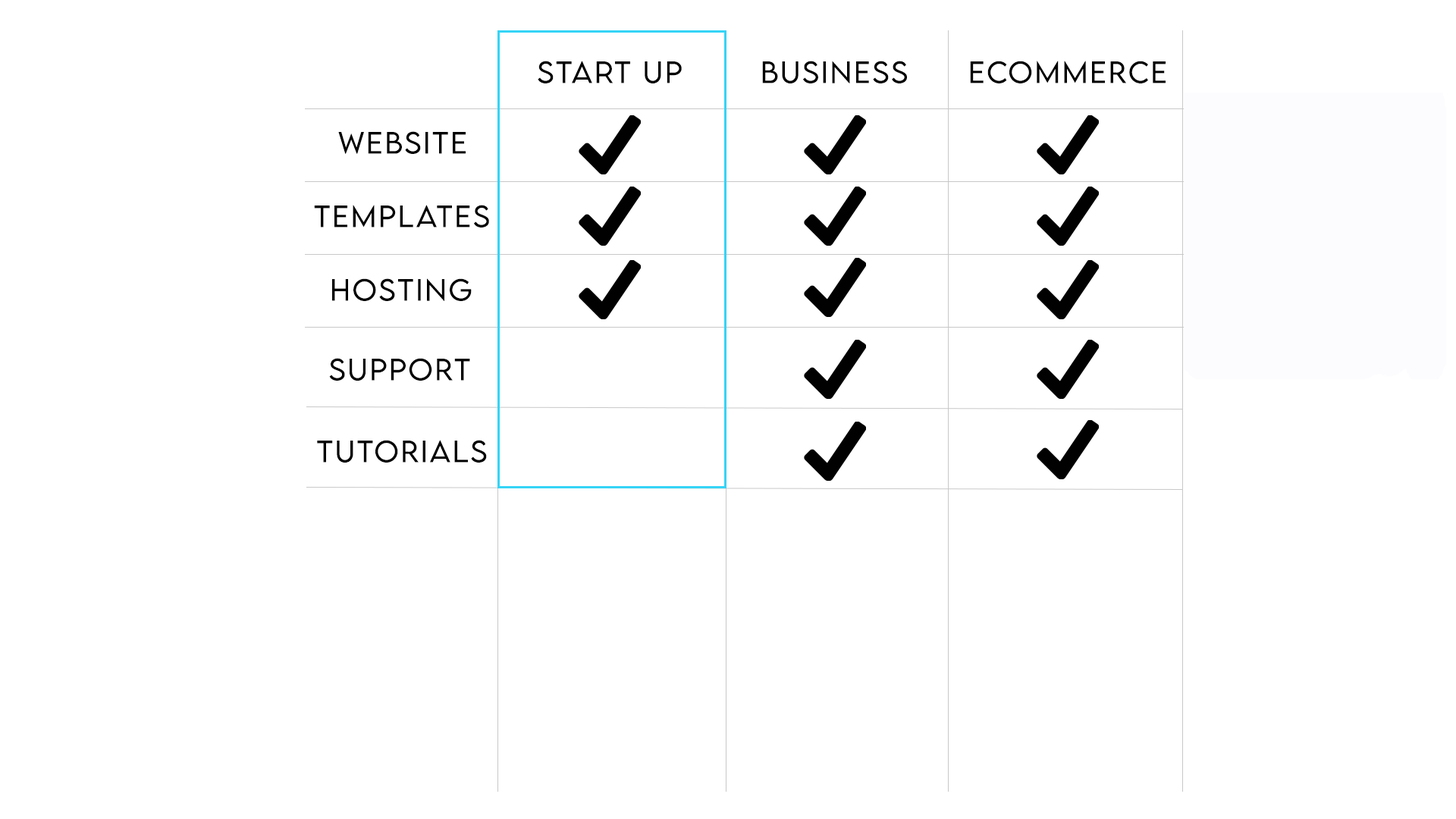
<style>
.page{position:relative;width:1456px;height:819px;background:#ffffff}
.page>*{position:absolute;margin:0}
.t1{font:27.3px "LEMONMILK-Light";letter-spacing:0.075em;color:#000000}
</style>
<div class="page">
<p class="t1" style="left:538px;top:61px;width:144px;height:22px">Start up</p>
<p class="t1" style="left:762px;top:61px;width:145px;height:22px">Business</p>
<p class="t1" style="left:970px;top:61px;width:196px;height:22px">ECommerce</p>
<p class="t1" style="left:338px;top:131px;width:128px;height:23px">Website</p>
<p class="t1" style="left:314px;top:205px;width:175px;height:22px">Templates</p>
<p class="t1" style="left:332px;top:278px;width:140px;height:23px">Hosting</p>
<p class="t1" style="left:329px;top:358px;width:141px;height:23px">Support</p>
<p class="t1" style="left:317px;top:440px;width:170px;height:23px">Tutorials</p>
</div>
